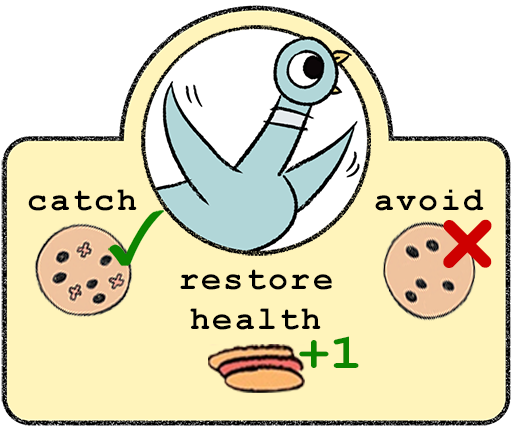
<style>
.page{position:relative;width:512px;height:429px;background:#fff4bb}
.page>*{position:absolute;margin:0}
.t1{font:33.3px "CourierNewPS-BoldMT";letter-spacing:0.07em;color:#000000}
.t2{font:120.4px "CourierNewPS-BoldMT";letter-spacing:0.07em;color:#ce0000}
.t3{font:48.7px "CourierNewPS-BoldMT";letter-spacing:0.07em;color:#0d8600;scale:1.16 1}
</style>
<div class="page">
<p class="t1" style="left:28px;top:189px;width:109px;height:22px">catch</p>
<p class="t1" style="left:375px;top:189px;width:109px;height:22px">avoid</p>
<p class="t2" style="left:443px;top:219px;width:49px;height:49px">×</p>
<p class="t1" style="left:180px;top:269px;width:152px;height:61px;text-align:center">restore<br>health</p>
<p class="t3" style="left:299px;top:336px;width:60px;height:32px">+1</p>
</div>
